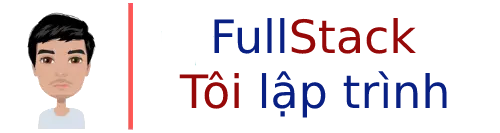
<style>
.page{position:relative;width:500px;height:133px;background:#ffffff}
.page>*{position:absolute;margin:0}
.t1{font:46px "DejaVuSans";color:#960909}
.t2{font:46px "DejaVuSans";color:#092084}
</style>
<div class="page">
<p class="t1" style="left:214px;top:18px;width:202px;height:36px"><span class="t2">Full</span>Stack</p>
<p class="t2" style="left:179px;top:71px;width:268px;height:47px"><span class="t1">Tôi </span>lập trình</p>
</div>
